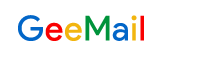
<style>
.page{position:relative;width:224px;height:60px;background:#ffffff}
.page>*{position:absolute;margin:0}
.t1{font:34px "ProductSans-Regular";color:#0266c8;font-weight:bold}
.t2{font:34px "ProductSans-Regular";color:#f90101;font-weight:bold}
.t3{font:34px "ProductSans-Regular";color:#f2b50f;font-weight:bold}
.t4{font:34px "ProductSans-Regular";color:#00933b;font-weight:bold}
</style>
<div class="page">
<p class="t1" style="left:18px;top:15px;width:126px;height:26px">G<span class="t2">e</span><span class="t3">e</span><span class="t4">M</span>a<span class="t3">i</span><span class="t2">l</span></p>
</div>
